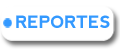
<style>
.page{position:relative;width:120px;height:50px;background:#ffffff}
.page>*{position:absolute;margin:0}
.t1{font:17px "nevis-Bold";color:#3399ff}
</style>
<div class="page">
<p class="t1" style="left:16px;top:15px;width:94px;height:13px">REPORTES</p>
</div>
